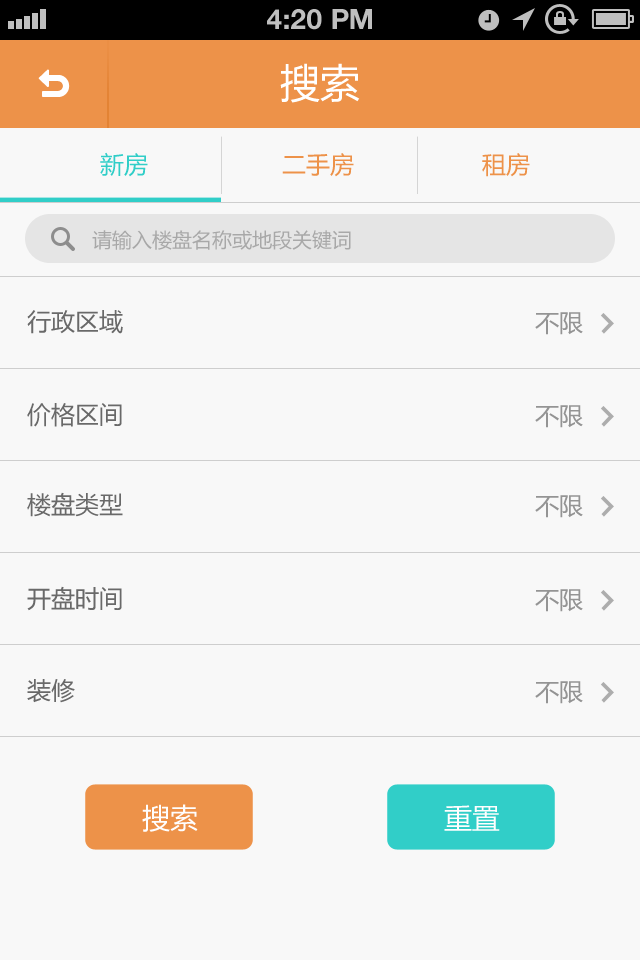
<style>
.page{position:relative;width:640px;height:960px;background:#f8f8f8}
.page>*{position:absolute;margin:0}
.t1{font:28px "HelveticaNeue-Bold";color:#bfbfbf;text-transform:uppercase}
.t2{font:40px "MicrosoftYaHei";color:#ffffff}
.t3{font:24px "MicrosoftYaHei";color:#31cec8}
.t4{font:24px "MicrosoftYaHei";color:#ed9249}
.t5{font:20px "MicrosoftYaHei";color:#a8a8a8}
.t6{font:24px "MicrosoftYaHei";color:#696969}
.t7{font:24px "MicrosoftYaHei";color:#949494}
.t8{font:28px "MicrosoftYaHei";color:#fffefe}
</style>
<div class="page">
<p class="t1" style="left:267px;top:9px;width:105px;height:21px">4:20 PM</p>
<p class="t2" style="left:280px;top:63px;width:80px;height:40px">搜索</p>
<p class="t3" style="left:100px;top:152px;width:48px;height:25px">新房</p>
<p class="t4" style="left:282px;top:153px;width:72px;height:24px">二手房</p>
<p class="t4" style="left:482px;top:153px;width:48px;height:24px">租房</p>
<p class="t5" style="left:92px;top:230px;width:259px;height:20px">请输入楼盘名称或地段关键词</p>
<p class="t6" style="left:27px;top:310px;width:96px;height:24px">行政区域</p>
<p class="t7" style="left:535px;top:312px;width:48px;height:23px">不限</p>
<p class="t6" style="left:27px;top:403px;width:95px;height:24px">价格区间</p>
<p class="t7" style="left:535px;top:405px;width:48px;height:23px">不限</p>
<p class="t6" style="left:27px;top:492px;width:96px;height:25px">楼盘类型</p>
<p class="t7" style="left:535px;top:495px;width:48px;height:23px">不限</p>
<p class="t6" style="left:27px;top:586px;width:95px;height:25px">开盘时间</p>
<p class="t7" style="left:535px;top:589px;width:48px;height:23px">不限</p>
<p class="t6" style="left:27px;top:679px;width:48px;height:24px">装修</p>
<p class="t7" style="left:535px;top:681px;width:48px;height:23px">不限</p>
<p class="t8" style="left:142px;top:804px;width:56px;height:28px">搜索</p>
<p class="t8" style="left:444px;top:805px;width:56px;height:26px">重置</p>
</div>
